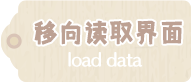
<style>
.page{position:relative;width:191px;height:82px}
.page>*{position:absolute;margin:0}
.t1{font:26.1px "shetumodengxiaofangti";color:#bda193;font-weight:bold;scale:0.94 1}
</style>
<div class="page">
<p class="t1" style="left:34px;top:20px;width:148px;height:25px">移向读取界面</p>
</div>
